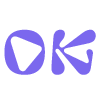
<style>
.page{position:relative;width:100px;height:100px;background:#ffffff}
.page>*{position:absolute;margin:0}
.t1{font:57.1px "Pilowlava-Regular";color:#7b68ee}
</style>
<div class="page">
<p class="t1" style="left:4px;top:29px;width:92px;height:46px">OK</p>
</div>
